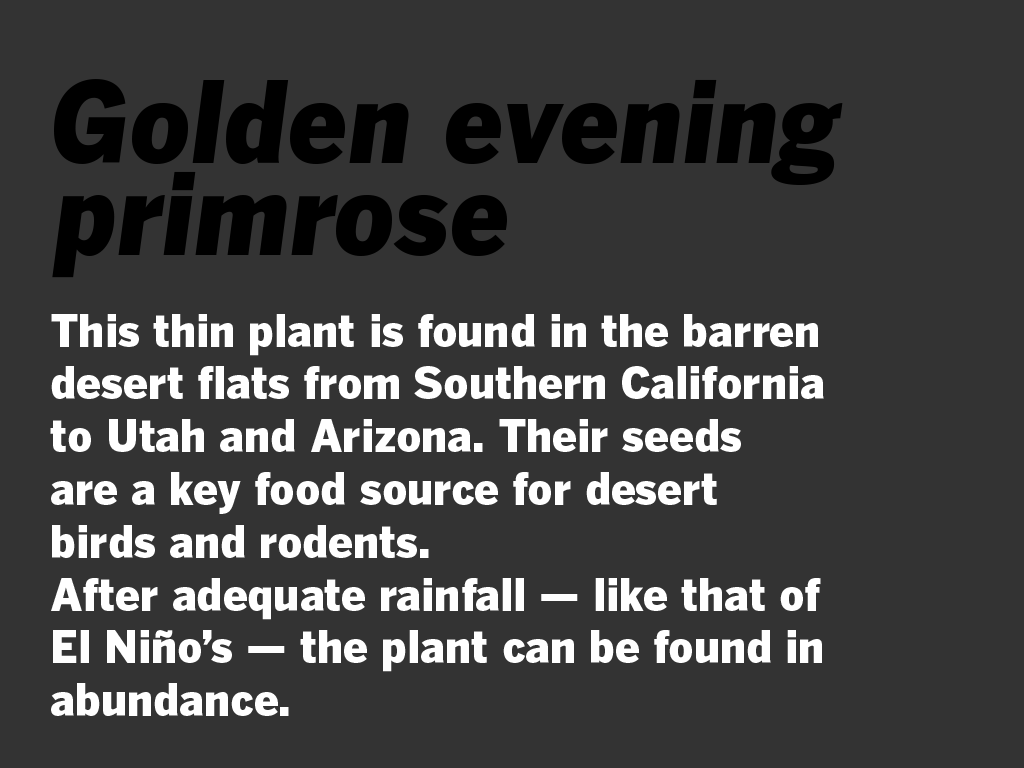
<style>
.page{position:relative;width:1024px;height:768px;background:#333333}
.page>*{position:absolute;margin:0}
.t1{font:44px "BentonGothic-Black";color:#000000}
.t2{font:112px "BentonGothic-BlackItalic";color:#000000}
.t3{font:44px "BentonGothic-Black";color:#ffffff}
</style>
<div class="page">
<p class="t1" style="left:54px;top:79px;width:789px;height:106px"><span class="t2">Golden evening<br><br><br></span>Geraea canescens</p>
<p class="t2" style="left:52px;top:171px;width:455px;height:107px">primrose</p>
<p class="t3" style="left:50px;top:314px;width:774px;height:402px">This thin plant is found in the barren desert flats from Southern California to Utah and Arizona. Their seeds<br>are a key food source for desert birds and rodents.<br>After adequate rainfall — like that of El Niño’s — the plant can be found in abundance.</p>
</div>
